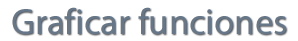
<style>
.page{position:relative;width:298px;height:41px;background:#ffffff}
.page>*{position:absolute;margin:0}
.t1{font:36.7px "MyriadPro-Regular";color:#657789}
</style>
<div class="page">
<p class="t1" style="left:12px;top:7px;width:274px;height:28px">Graficar funciones</p>
</div>
